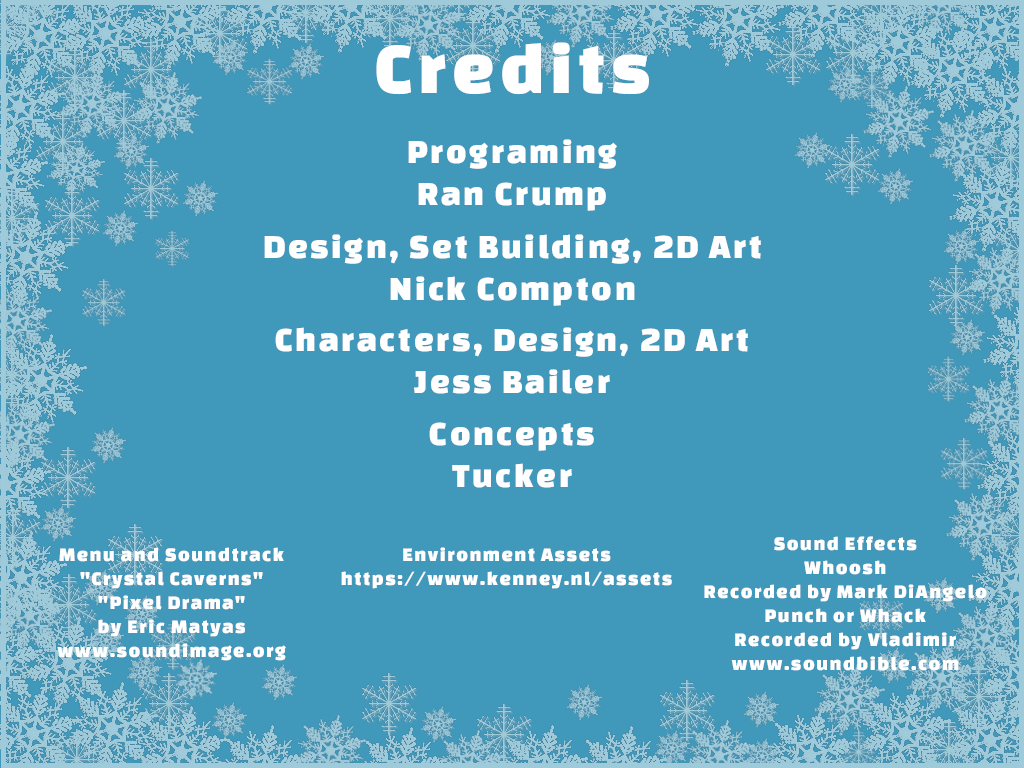
<style>
.page{position:relative;width:1024px;height:768px;background:#4098ba}
.page>*{position:absolute;margin:0}
.t1{font:75px "ChangaOne";letter-spacing:0.075em;color:#ffffff}
.t2{font:35px "ChangaOne";letter-spacing:0.075em;color:#ffffff}
.t3{font:20px "ChangaOne";letter-spacing:0.075em;color:#ffffff}
</style>
<div class="page">
<p class="t1" style="left:376px;top:42px;width:273px;height:53px">Credits</p>
<p class="t2" style="left:408px;top:139px;width:209px;height:72px;text-align:center">Programing<br>Ran Crump</p>
<p class="t2" style="left:264px;top:234px;width:497px;height:72px;text-align:center">Design, Set Building, 2D Art<br>Nick Compton</p>
<p class="t2" style="left:275px;top:327px;width:473px;height:67px;text-align:center">Characters, Design, 2D Art<br>Jess Bailer</p>
<p class="t2" style="left:429px;top:422px;width:165px;height:66px;text-align:center">Concepts<br>Tucker</p>
<p class="t3" style="left:704px;top:536px;width:283px;height:135px;text-align:center">Sound Effects <br>Whoosh<br>Recorded by Mark DiAngelo<br>Punch or Whack<br>Recorded by Vladimir <br>www.soundbible.com</p>
<p class="t3" style="left:57px;top:547px;width:229px;height:114px;text-align:center">Menu and Soundtrack<br>"Crystal Caverns"<br>"Pixel Drama"<br>by Eric Matyas<br>www.soundimage.org</p>
<p class="t3" style="left:341px;top:547px;width:331px;height:42px;text-align:center">Environment Assets<br>https://www.kenney.nl/assets</p>
</div>
